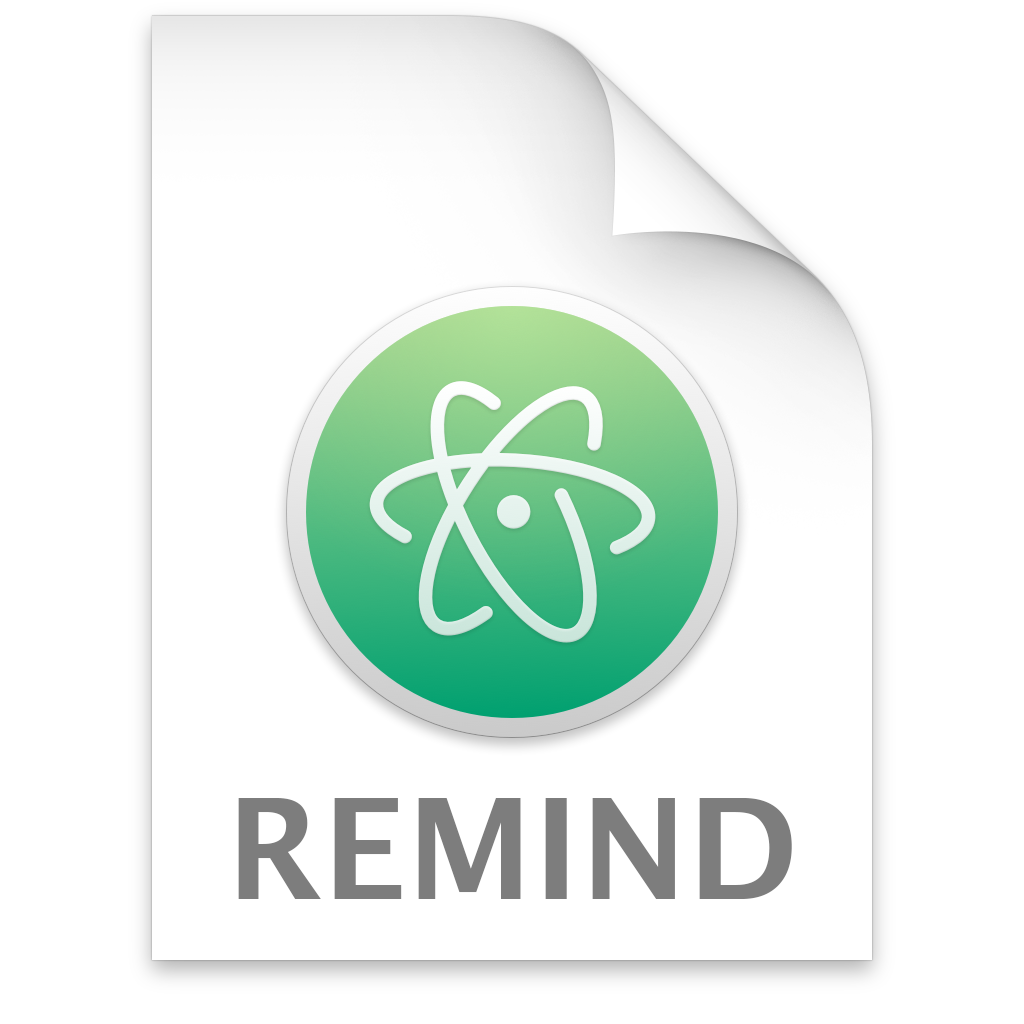
<style>
.page{position:relative;width:1024px;height:1024px;background:#ffffff}
.page>*{position:absolute;margin:0}
.t1{font:140px "LucidaGrande-Bold";color:#7d7d7d}
</style>
<div class="page">
<p class="t1" style="left:238px;top:798px;width:554px;height:101px">REMIND</p>
</div>
